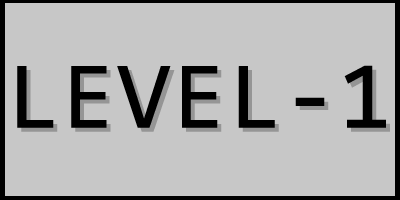
<style>
.page{position:relative;width:400px;height:200px;background:#c7c7c7}
.page>*{position:absolute;margin:0}
.t1{font:96px "Consolas";color:#000000;font-weight:bold}
.t2{font:96px "Consolas";font-weight:bold}
</style>
<div class="page">
<p class="t1" style="left:17px;top:65px;width:369px;height:63px">LEVEL-1</p>
<p class="t2" style="left:21px;top:69px;width:369px;height:63px">LEVEL-1</p>
</div>
